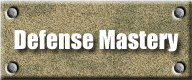
<style>
.page{position:relative;width:192px;height:80px}
.page>*{position:absolute;margin:0}
.t1{font:24px "Impact";color:#ffffff}
</style>
<div class="page">
<p class="t1" style="left:14px;top:30px;width:165px;height:22px">Defense Mastery</p>
</div>
